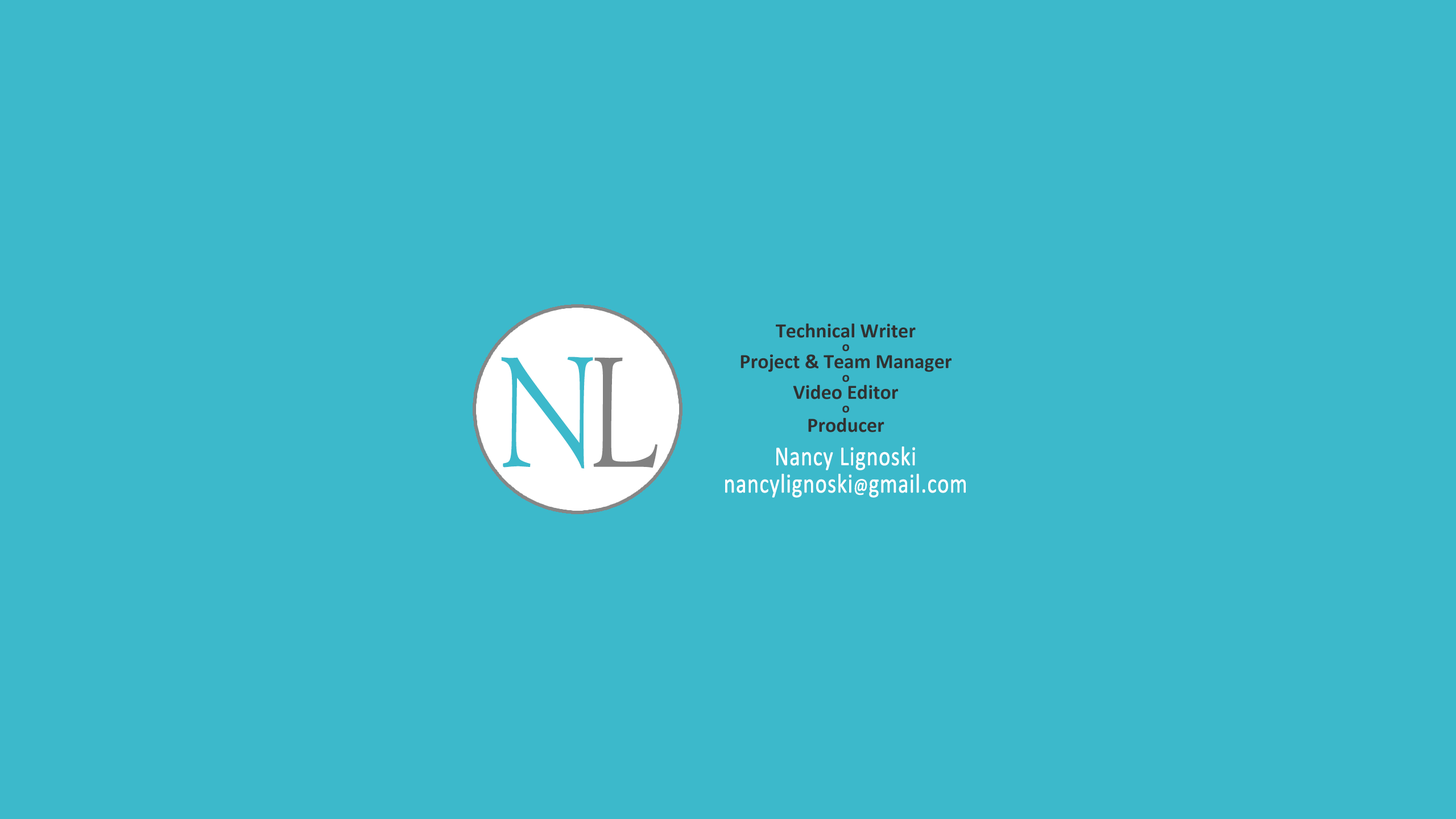
<style>
.page{position:relative;width:1456px;height:819px;background:#3cb9cb}
.page>*{position:absolute;margin:0}
.t1{font:20.5px/17.1px "Calibri-Bold";color:#313131}
.t2{font:14.2px/13.6px "Calibri-Bold";color:#313131}
.t3{font:20.5px/19.3px "Calibri-Bold";color:#313131}
.t4{font:172px "Centaur";color:#3cb9cb;scale:0.72 1}
.t5{font:173.8px "Centaur";color:#818181;scale:0.72 1}
.t6{font:27.3px/27.3px "Calibri";letter-spacing:0.01em;color:#ffffff;font-weight:bold;scale:0.8 1}
.t7{font:20.5px/27.3px "Calibri";letter-spacing:0.01em;color:#ffffff;font-weight:bold;scale:0.8 1}
</style>
<div class="page">
<p class="t1" style="left:741px;top:323px;width:211px;height:109px;text-align:center">Technical Writer<br><span class="t2">o<br></span>Project &amp; Team Manager<br><span class="t2">o<br></span>Video Editor<br><span class="t2">o<br></span><span class="t3">P</span>roducer</p>
<p class="t4" style="left:501px;top:357px;width:92px;height:112px">N</p>
<p class="t5" style="left:593px;top:357px;width:64px;height:111px">L</p>
<p class="t6" style="left:725px;top:446px;width:241px;height:52px;text-align:center">Nancy Lignoski<br>nancylignoski<span class="t7">@</span>gmail.com</p>
</div>
